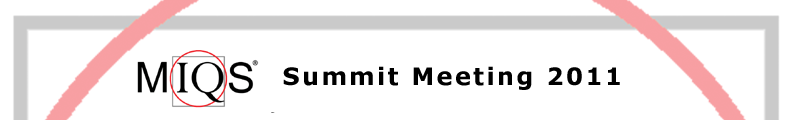
<style>
.page{position:relative;width:790px;height:120px;background:#ffffff}
.page>*{position:absolute;margin:0}
.t1{font:24px "Verdana-Bold";letter-spacing:0.1em;color:#000000}
</style>
<div class="page">
<p class="t1" style="left:283px;top:66px;width:337px;height:24px">Summit Meeting 2011</p>
</div>
